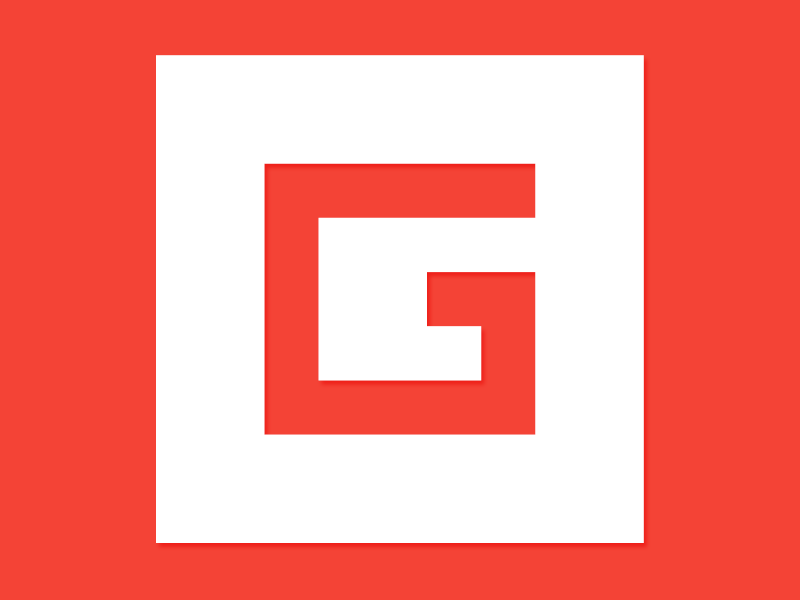
<style>
.page{position:relative;width:800px;height:600px;background:#f44336}
.page>*{position:absolute;margin:0}
.t1{font:867px "Inversionz";color:#ffffff}
</style>
<div class="page">
<p class="t1" style="left:156px;top:55px;width:488px;height:488px">g</p>
</div>
